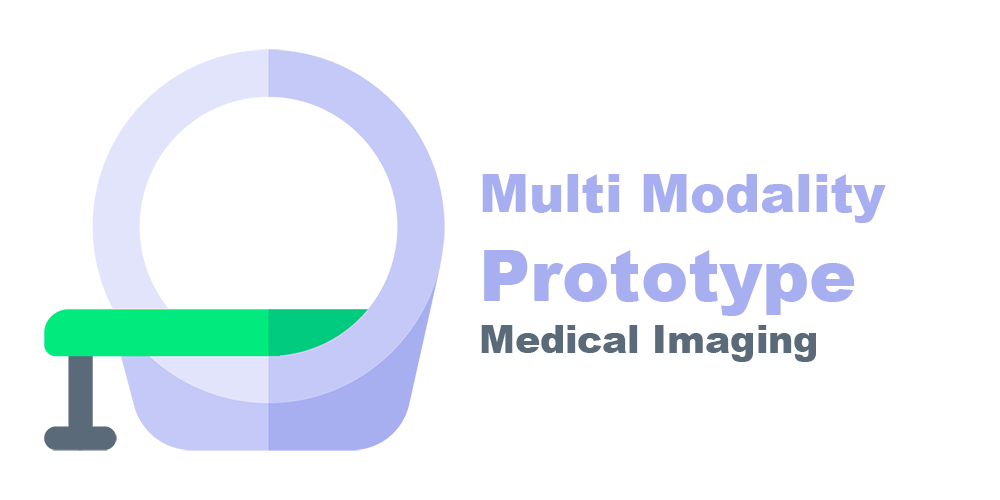
<style>
.page{position:relative;width:1000px;height:500px;background:#ffffff}
.page>*{position:absolute;margin:0}
.t1{font:52.7px "Arial-Black";color:#a8aff1}
.t2{font:70.5px "Arial-Black";color:#a8aff1}
.t3{font:37.6px "Arial-Black";color:#5a6a78}
</style>
<div class="page">
<p class="t1" style="left:482px;top:174px;width:404px;height:49px">Multi Modality</p>
<p class="t2" style="left:484px;top:250px;width:371px;height:66px">Prototype</p>
<p class="t3" style="left:481px;top:325px;width:335px;height:37px">Medical Imaging</p>
</div>
